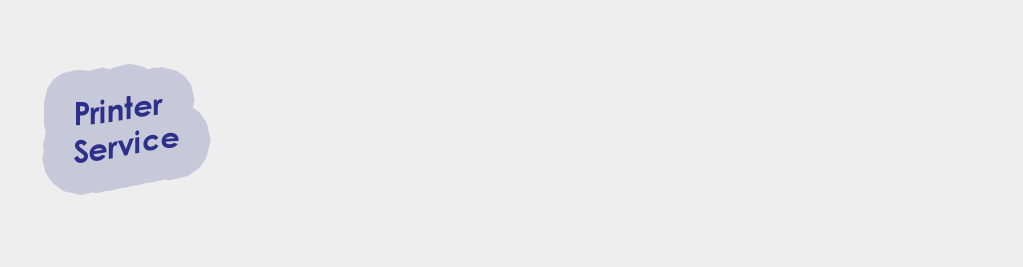
<style>
.page{position:relative;width:1023px;height:267px;background:#eeeeee}
.page>*{position:absolute;margin:0}
.t1{font:30px "CenturyGothic-Bold";color:#2c308b}
</style>
<div class="page">
<p class="t1" style="left:74px;top:95px;width:105px;height:68px">Printer <br>Service</p>
</div>
